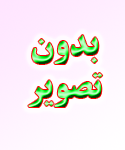
<style>
.page{position:relative;width:125px;height:150px}
.page>*{position:absolute;margin:0}
.t1{font:36px "BTitrBold"}
</style>
<div class="page">
<p class="t1" style="left:28px;top:35px;width:75px;height:72px;text-align:center">بدون<br>تصویر</p>
</div>
